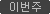
<style>
.page{position:relative;width:50px;height:14px;background:#404040}
.page>*{position:absolute;margin:0}
.t1{font:11px "Dotum";color:#bababa}
</style>
<div class="page">
<p class="t1" style="left:10px;top:2px;width:31px;height:10px">이번주</p>
</div>
